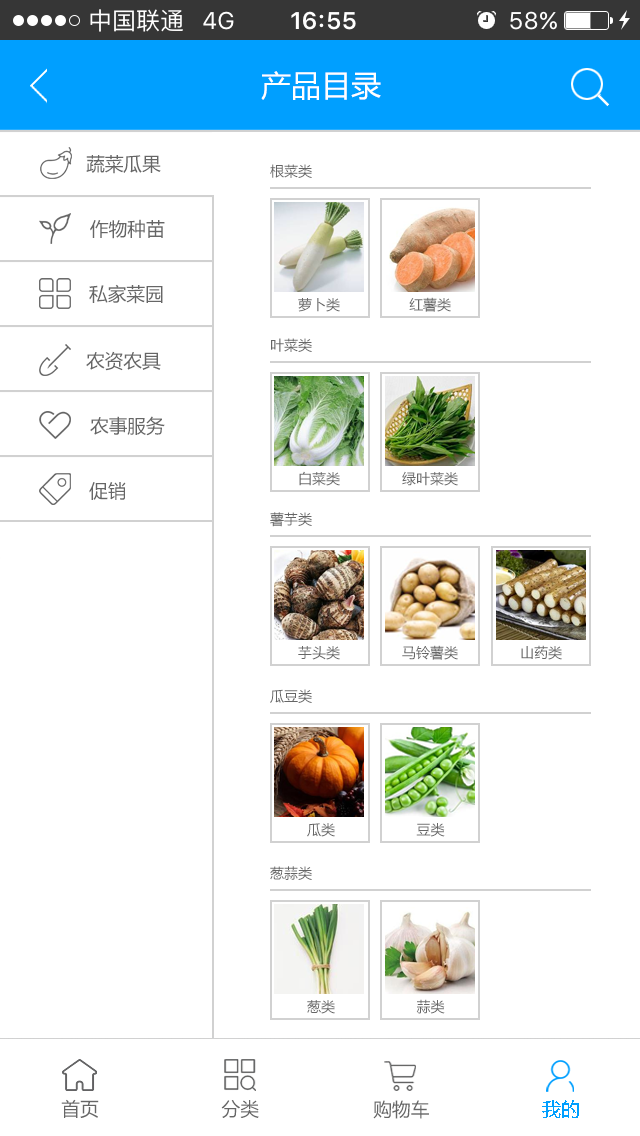
<style>
.page{position:relative;width:640px;height:1136px;background:#ffffff}
.page>*{position:absolute;margin:0}
.t1{font:30px "MicrosoftYaHei";color:#ffffff}
.t2{font:18.7px "MicrosoftYaHei";color:#666666}
.t3{font:14px "MicrosoftYaHei";color:#666666}
.t4{font:18.8px "MicrosoftYaHei";color:#666666}
</style>
<div class="page">
<p class="t1" style="left:261px;top:71px;width:120px;height:29px">产品目录</p>
<p class="t2" style="left:86px;top:155px;width:75px;height:19px">蔬菜瓜果</p>
<p class="t3" style="left:270px;top:164px;width:42px;height:14px">根菜类</p>
<p class="t2" style="left:90px;top:219px;width:75px;height:20px">作物种苗</p>
<p class="t2" style="left:89px;top:284px;width:74px;height:20px">私家菜园</p>
<p class="t3" style="left:298px;top:298px;width:42px;height:14px">萝卜类</p>
<p class="t3" style="left:409px;top:297px;width:42px;height:15px">红薯类</p>
<p class="t3" style="left:271px;top:338px;width:41px;height:14px">叶菜类</p>
<p class="t2" style="left:86px;top:351px;width:75px;height:20px">农资农具</p>
<p class="t2" style="left:90px;top:416px;width:75px;height:20px">农事服务</p>
<p class="t3" style="left:299px;top:471px;width:41px;height:15px">白菜类</p>
<p class="t3" style="left:402px;top:471px;width:56px;height:15px">绿叶菜类</p>
<p class="t2" style="left:89px;top:482px;width:37px;height:18px">促销</p>
<p class="t3" style="left:270px;top:512px;width:42px;height:15px">薯芋类</p>
<p class="t3" style="left:298px;top:646px;width:42px;height:14px">芋头类</p>
<p class="t3" style="left:402px;top:645px;width:56px;height:15px">马铃薯类</p>
<p class="t3" style="left:521px;top:645px;width:41px;height:15px">山药类</p>
<p class="t3" style="left:270px;top:689px;width:42px;height:14px">瓜豆类</p>
<p class="t3" style="left:307px;top:823px;width:28px;height:14px">瓜类</p>
<p class="t3" style="left:416px;top:823px;width:29px;height:14px">豆类</p>
<p class="t3" style="left:270px;top:866px;width:42px;height:14px">葱蒜类</p>
<p class="t3" style="left:307px;top:1000px;width:28px;height:14px">葱类</p>
<p class="t3" style="left:416px;top:999px;width:29px;height:15px">蒜类</p>
<p class="t2" style="left:61px;top:1099px;width:38px;height:19px">首页</p>
<p class="t2" style="left:221px;top:1100px;width:38px;height:18px">分类</p>
<p class="t4" style="left:373px;top:1100px;width:56px;height:19px">购物车</p>
</div>
